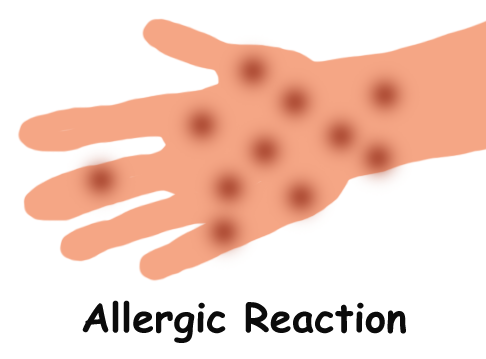
<style>
.page{position:relative;width:486px;height:359px;background:#ffffff}
.page>*{position:absolute;margin:0}
.t1{font:40px "ComicSansMS-Bold";color:#0b0b0b}
</style>
<div class="page">
<p class="t1" style="left:82px;top:300px;width:324px;height:43px">Allergic Reaction</p>
</div>
